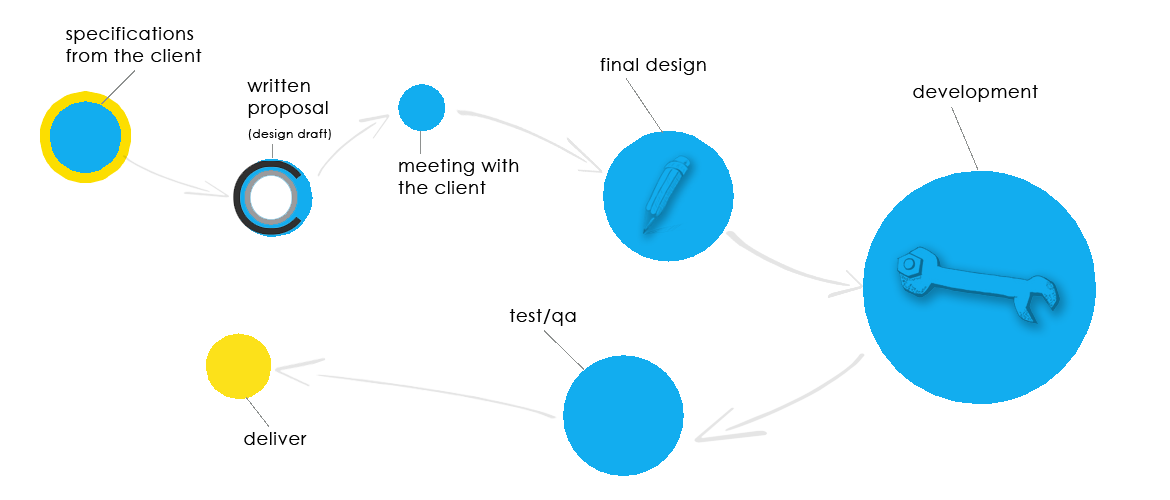
<style>
.page{position:relative;width:1170px;height:500px;background:#ffffff}
.page>*{position:absolute;margin:0}
.t1{font:18px "CenturyGothic";letter-spacing:0.05em;color:#000000}
.t2{font:12px/6px "CenturyGothic";letter-spacing:0.05em;color:#000000}
</style>
<div class="page">
<p class="t1" style="left:66px;top:27px;width:136px;height:35px">specifications <br>from the client</p>
<p class="t1" style="left:600px;top:58px;width:106px;height:17px">final design</p>
<p class="t1" style="left:247px;top:79px;width:84px;height:61px">written <br>proposal<br><br><span class="t2"><br><br>(design draft)</span></p>
<p class="t1" style="left:913px;top:85px;width:125px;height:17px">development</p>
<p class="t1" style="left:398px;top:159px;width:121px;height:35px">meeting with the client</p>
<p class="t1" style="left:509px;top:309px;width:67px;height:17px">test/qa</p>
<p class="t1" style="left:244px;top:432px;width:63px;height:13px">deliver</p>
</div>
